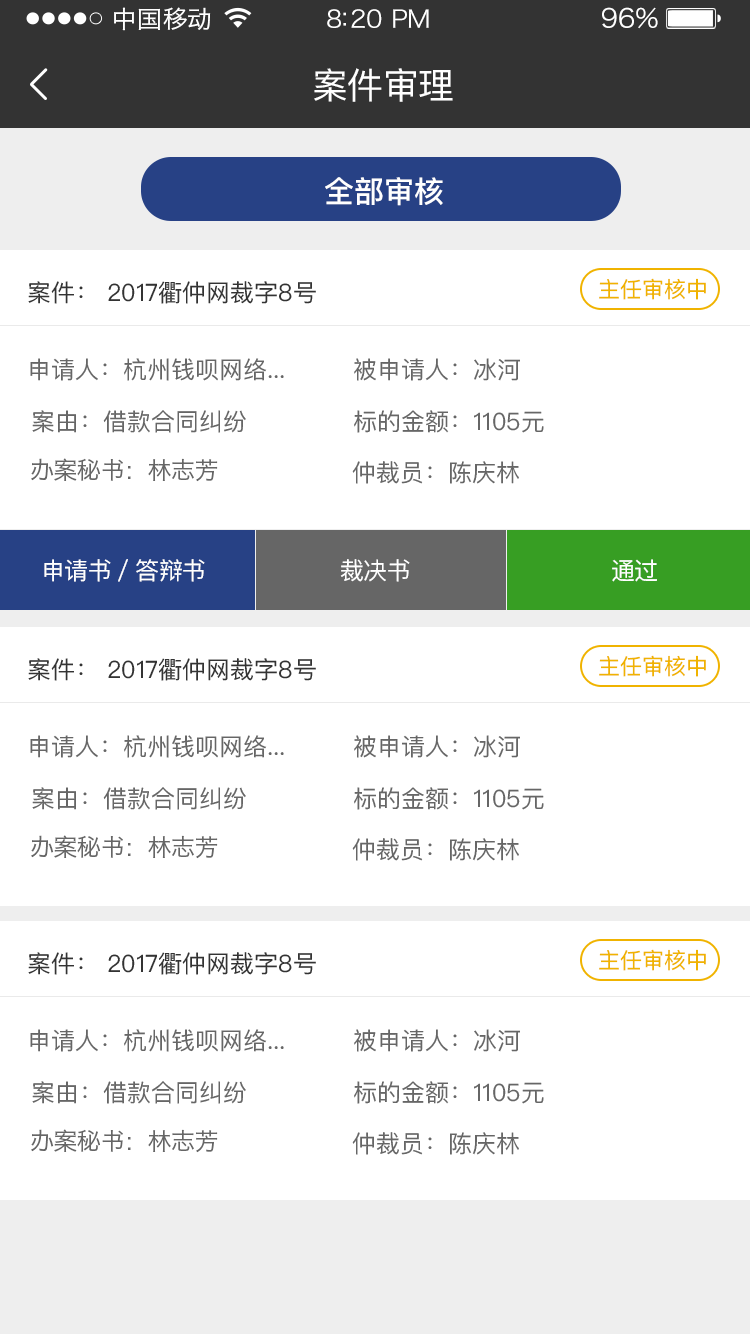
<style>
.page{position:relative;width:750px;height:1334px;background:#ffffff}
.page>*{position:absolute;margin:0}
.t1{font:24px "HiraginoSansGB-W3";letter-spacing:0.02em;color:#ffffff;scale:1.03 1}
.t2{font:24px "HiraginoSansGB-W3";letter-spacing:-0.02em;color:#ffffff;scale:1.03 1}
.t3{font:26.2px "HiraginoSansGB-W3";letter-spacing:-0.02em;color:#ffffff;scale:1.03 1}
.t4{font:36px "PingFangSC-Regular";letter-spacing:-0.02em;color:#ffffff}
.t5{font:30px "PingFangSC-Medium";color:#ffffff}
.t6{font:24px "PingFangSC-Regular";color:#333333}
.t7{font:22px "PingFangSC-Regular";color:#f0b300}
.t8{font:24px "PingFangSC-Regular";color:#666666}
.t9{font:24px "HiraginoSansGB-W3";letter-spacing:-0.02em;color:#666666}
.t10{font:24px "PingFangSC-Regular";letter-spacing:-0.02em;color:#ffffff}
</style>
<div class="page">
<p class="t1" style="left:114px;top:7px;width:97px;height:24px">中国移动</p>
<p class="t2" style="left:327px;top:9px;width:102px;height:19px">8:20 PM</p>
<p class="t3" style="left:602px;top:7px;width:56px;height:22px">96%</p>
<p class="t4" style="left:314px;top:68px;width:139px;height:34px">案件审理</p>
<p class="t5" style="left:325px;top:177px;width:118px;height:29px">全部审核</p>
<p class="t6" style="left:28px;top:281px;width:288px;height:23px">案件： 2017衢仲网裁字8号</p>
<p class="t7" style="left:599px;top:278px;width:107px;height:22px">主任审核中</p>
<p class="t8" style="left:30px;top:358px;width:254px;height:23px">申请人：杭州钱呗网络...</p>
<p class="t8" style="left:354px;top:358px;width:166px;height:23px">被申请人：冰河</p>
<p class="t8" style="left:32px;top:410px;width:214px;height:23px">案由：借款合同纠纷</p>
<p class="t8" style="left:354px;top:410px;width:190px;height:23px">标的金额：1105元</p>
<p class="t9" style="left:31px;top:458px;width:187px;height:24px">办案秘书：林志芳</p>
<p class="t8" style="left:352px;top:461px;width:167px;height:23px">仲裁员：陈庆林</p>
<p class="t10" style="left:44px;top:559px;width:161px;height:23px">申请书／答辩书</p>
<p class="t10" style="left:340px;top:559px;width:70px;height:23px">裁决书</p>
<p class="t10" style="left:612px;top:559px;width:45px;height:23px">通过</p>
<p class="t6" style="left:28px;top:658px;width:288px;height:23px">案件： 2017衢仲网裁字8号</p>
<p class="t7" style="left:599px;top:655px;width:107px;height:22px">主任审核中</p>
<p class="t8" style="left:30px;top:735px;width:254px;height:23px">申请人：杭州钱呗网络...</p>
<p class="t8" style="left:354px;top:735px;width:166px;height:23px">被申请人：冰河</p>
<p class="t8" style="left:32px;top:787px;width:214px;height:23px">案由：借款合同纠纷</p>
<p class="t8" style="left:354px;top:787px;width:190px;height:23px">标的金额：1105元</p>
<p class="t9" style="left:31px;top:835px;width:187px;height:24px">办案秘书：林志芳</p>
<p class="t8" style="left:352px;top:838px;width:167px;height:23px">仲裁员：陈庆林</p>
<p class="t6" style="left:28px;top:952px;width:288px;height:23px">案件： 2017衢仲网裁字8号</p>
<p class="t7" style="left:599px;top:949px;width:107px;height:22px">主任审核中</p>
<p class="t8" style="left:30px;top:1029px;width:254px;height:23px">申请人：杭州钱呗网络...</p>
<p class="t8" style="left:354px;top:1029px;width:166px;height:23px">被申请人：冰河</p>
<p class="t8" style="left:32px;top:1081px;width:214px;height:23px">案由：借款合同纠纷</p>
<p class="t8" style="left:354px;top:1081px;width:190px;height:23px">标的金额：1105元</p>
<p class="t9" style="left:31px;top:1129px;width:187px;height:24px">办案秘书：林志芳</p>
<p class="t8" style="left:352px;top:1132px;width:167px;height:23px">仲裁员：陈庆林</p>
</div>
